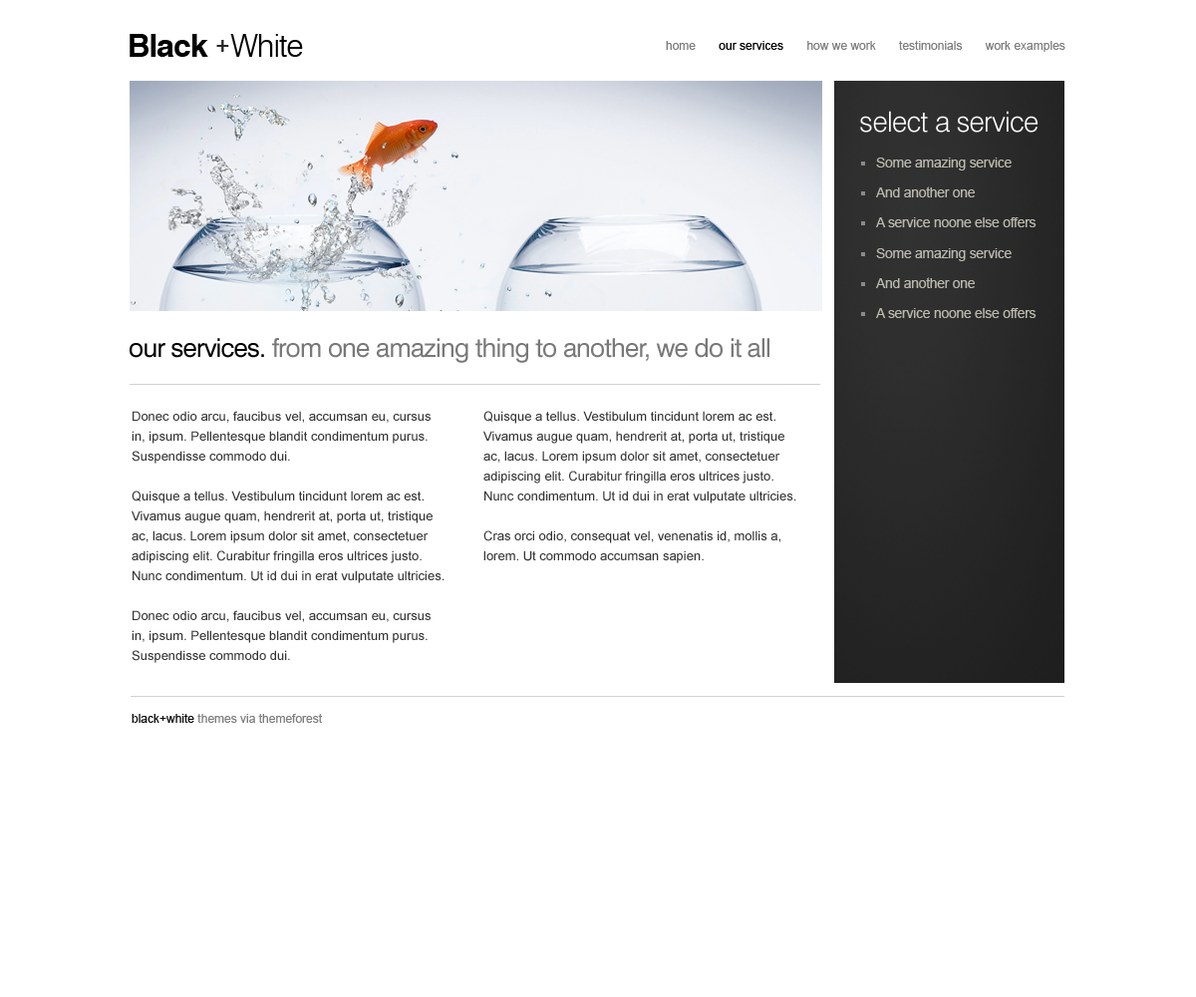
<style>
.page{position:relative;width:1196px;height:997px;background:#ffffff}
.page>*{position:absolute;margin:0}
.t1{font:31.7px "Swiss721BT-Bold";letter-spacing:-0.03em;color:#000000}
.t2{font:31.7px "Swiss721BT-Light";letter-spacing:-0.03em;color:#000000}
.t3{font:19.9px "Swiss721BT-Heavy";color:#262626}
.t4{font:12px "ArialMT";color:#7e7e7e}
.t5{font:12px "ArialMT";color:#000000}
.t6{font:28.2px "Swiss721BT-Light";letter-spacing:-0.02em;color:#ffffff}
.t7{font:14px/29.9px "ArialMT";letter-spacing:-0.02em;color:#bab9ad}
.t8{font:25.9px "Swiss721BT-Roman";letter-spacing:-0.03em;color:#787878}
.t9{font:25.9px "Swiss721BT-Roman";letter-spacing:-0.03em;color:#000000}
.t10{font:13px/19.9px "ArialMT";color:#353535}
.t11{font:12px "ArialMT";color:#0e0d0d}
</style>
<div class="page">
<p class="t1" style="left:130px;top:34px;width:173px;height:23px">Black   <span class="t2">White</span></p>
<p class="t3" style="left:216px;top:40px;width:13px;height:12px">+</p>
<p class="t4" style="left:666px;top:41px;width:400px;height:11px">home       <span class="t5">our services</span>       how we work       testimonials       work examples</p>
<p class="t6" style="left:860px;top:111px;width:178px;height:22px">select a service</p>
<p class="t7" style="left:876px;top:158px;width:161px;height:69px">Some amazing service<br>And another one<br>A service noone else offers</p>
<p class="t7" style="left:876px;top:248px;width:161px;height:70px">Some amazing service<br>And another one<br>A service noone else offers</p>
<p class="t8" style="left:130px;top:338px;width:640px;height:25px"><span class="t9">our services. </span>from one amazing thing to another, we do it all</p>
<p class="t10" style="left:132px;top:411px;width:313px;height:252px">Donec odio arcu, faucibus vel, accumsan eu, cursus in, ipsum. Pellentesque blandit condimentum purus. Suspendisse commodo dui. <br><br>Quisque a tellus. Vestibulum tincidunt lorem ac est. Vivamus augue quam, hendrerit at, porta ut, tristique ac, lacus. Lorem ipsum dolor sit amet, consectetuer adipiscing elit. Curabitur fringilla eros ultrices justo. Nunc condimentum. Ut id dui in erat vulputate ultricies.<br><br>Donec odio arcu, faucibus vel, accumsan eu, cursus in, ipsum. Pellentesque blandit condimentum purus. Suspendisse commodo dui.</p>
<p class="t10" style="left:483px;top:411px;width:313px;height:152px">Quisque a tellus. Vestibulum tincidunt lorem ac est. Vivamus augue quam, hendrerit at, porta ut, tristique ac, lacus. Lorem ipsum dolor sit amet, consectetuer adipiscing elit. Curabitur fringilla eros ultrices justo. Nunc condimentum. Ut id dui in erat vulputate ultricies.<br><br>Cras orci odio, consequat vel, venenatis id, mollis a, lorem. Ut commodo accumsan sapien.</p>
<p class="t4" style="left:132px;top:714px;width:190px;height:9px"><span class="t11">black+white</span> themes via themeforest</p>
</div>
